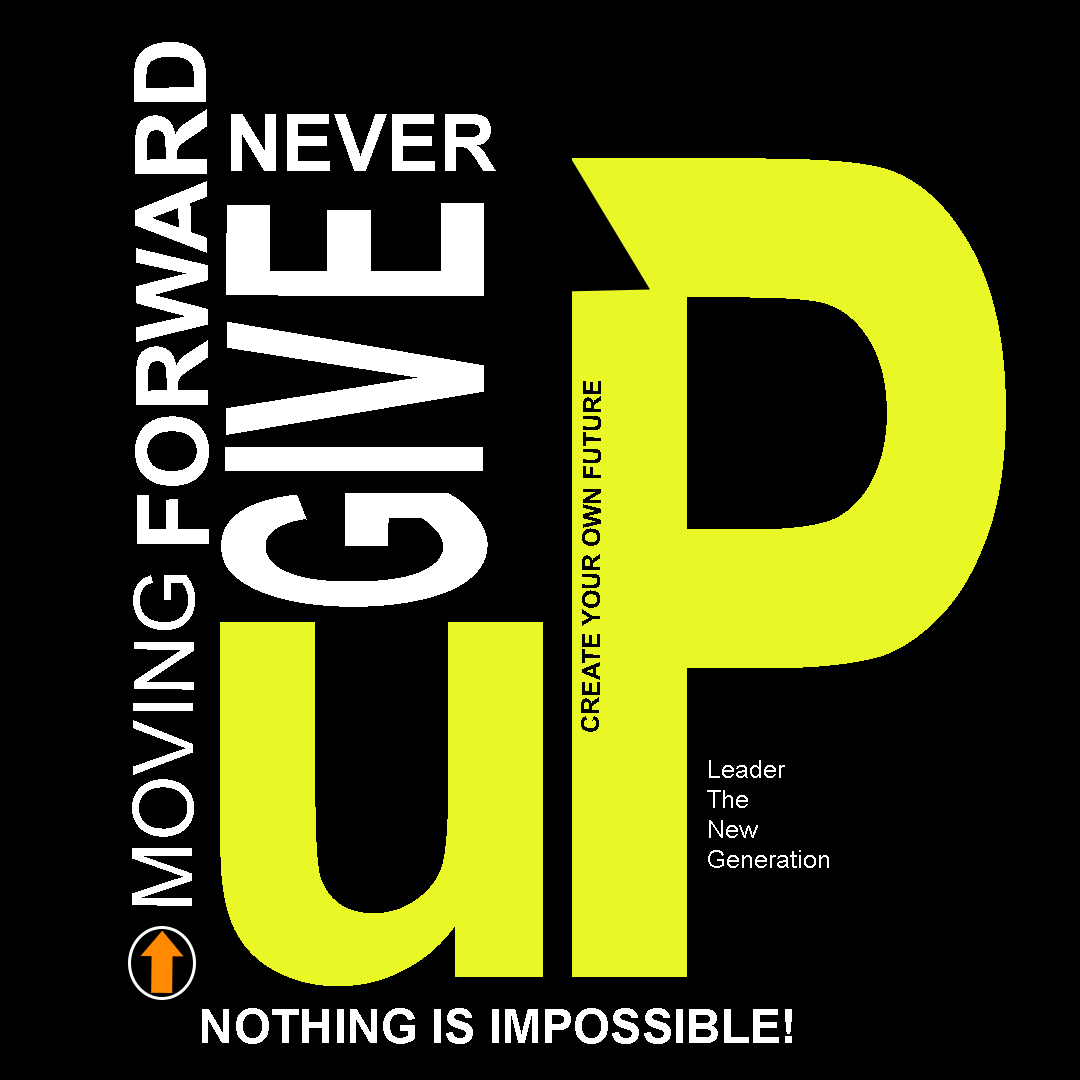
<style>
.page{position:relative;width:1080px;height:1080px;background:#000000}
.page>*{position:absolute;margin:0}
.t1{font:100px "Arial-BoldMT";color:#ffffff;text-transform:uppercase}
.t2{font:78.5px "Arial-BoldMT";color:#ffffff;text-transform:uppercase}
.t3{font:1142.3px "Arial-BoldMT";color:#e9f726;scale:0.69 1}
.t4{font:359.8px "Arial-BoldMT";color:#ffffff;text-transform:uppercase;scale:0.47 1}
.t5{font:41.7px "Arial-BoldMT";color:#000000;text-transform:uppercase;scale:0.47 1}
.t6{font:25px "Arial-BoldMT";color:#000000;text-transform:uppercase}
.t7{font:84.5px "ArialMT";color:#ffffff;text-transform:uppercase}
.t8{font:683px "Arial-BoldMT";color:#e9f726}
.t9{font:25px "ArialMT";color:#ffffff}
.t10{font:47.4px "Arial-BoldMT";color:#ffffff;text-transform:uppercase}
</style>
<div class="page">
<p class="t1" style="left:134px;top:42px;width:75px;height:502px;rotate:-90deg">Forward</p>
<p class="t2" style="left:231px;top:114px;width:265px;height:57px">never</p>
<p class="t3" style="left:572px;top:158px;width:434px;height:819px">P</p>
<p class="t4" style="left:221px;top:203px;width:267px;height:404px;rotate:-90deg">giv<span class="t5">v</span>e</p>
<p class="t6" style="left:581px;top:381px;width:20px;height:351px;rotate:-90deg">create your own future</p>
<p class="t7" style="left:132px;top:575px;width:63px;height:331px;rotate:-90deg">moving</p>
<p class="t8" style="left:220px;top:622px;width:323px;height:364px">u</p>
<p class="t9" style="left:707px;top:760px;width:122px;height:108px">Leader<br>The<br>New<br>Generation</p>
<p class="t10" style="left:202px;top:1008px;width:590px;height:36px">nothing is impossible!</p>
</div>
